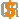
<style>
.page{position:relative;width:19px;height:19px;background:#ffffff}
.page>*{position:absolute;margin:0}
.t1{font:18.7px "Impact";color:#97a28d}
.t2{font:22.7px "FranklinGothic-Demi";color:#f68307}
.t3{font:21.3px "Haettenschweiler";color:#97a28d}
</style>
<div class="page">
<p class="t1" style="left:1px;top:2px;width:9px;height:15px">C</p>
<p class="t2" style="left:4px;top:0px;width:11px;height:19px">$</p>
<p class="t3" style="left:11px;top:2px;width:8px;height:15px">R</p>
</div>
